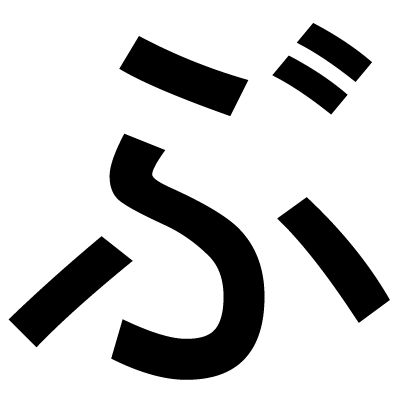
<style>
.page{position:relative;width:400px;height:400px;background:#ffffff}
.page>*{position:absolute;margin:0}
.t1{font:416.7px "MS-PGothic";color:#000000}
</style>
<div class="page">
<p class="t1" style="left:8px;top:23px;width:382px;height:357px">ぶ</p>
</div>
